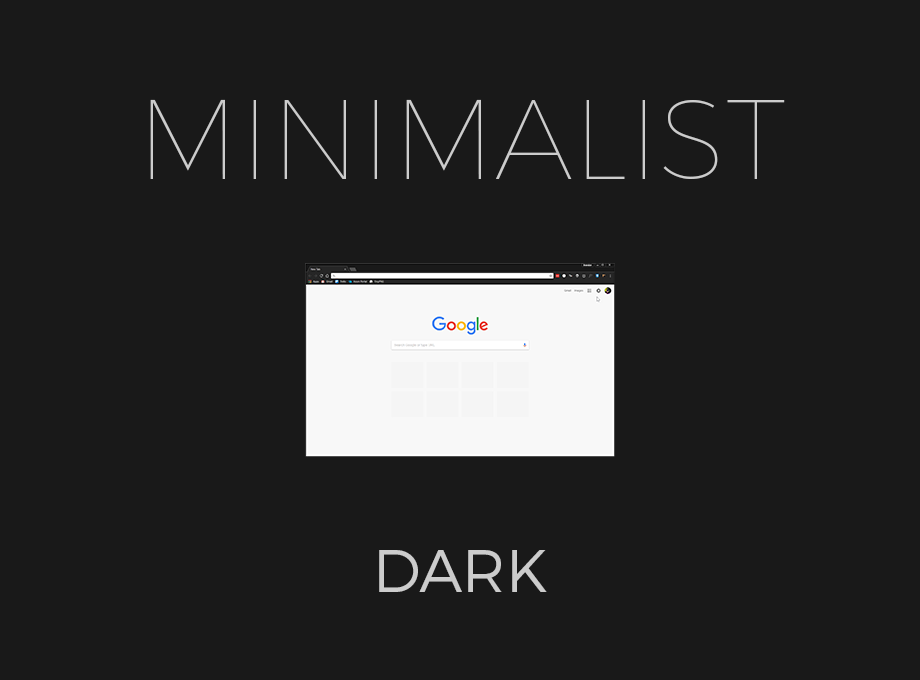
<style>
.page{position:relative;width:920px;height:680px;background:#191919}
.page>*{position:absolute;margin:0}
.t1{font:113px "Montserrat-Hairline";color:#cccccc}
.t2{font:60px "Montserrat-Light";color:#cccccc}
</style>
<div class="page">
<p class="t1" style="left:150px;top:99px;width:635px;height:80px">MINIMALIST</p>
<p class="t2" style="left:379px;top:550px;width:168px;height:42px">DARK</p>
</div>
